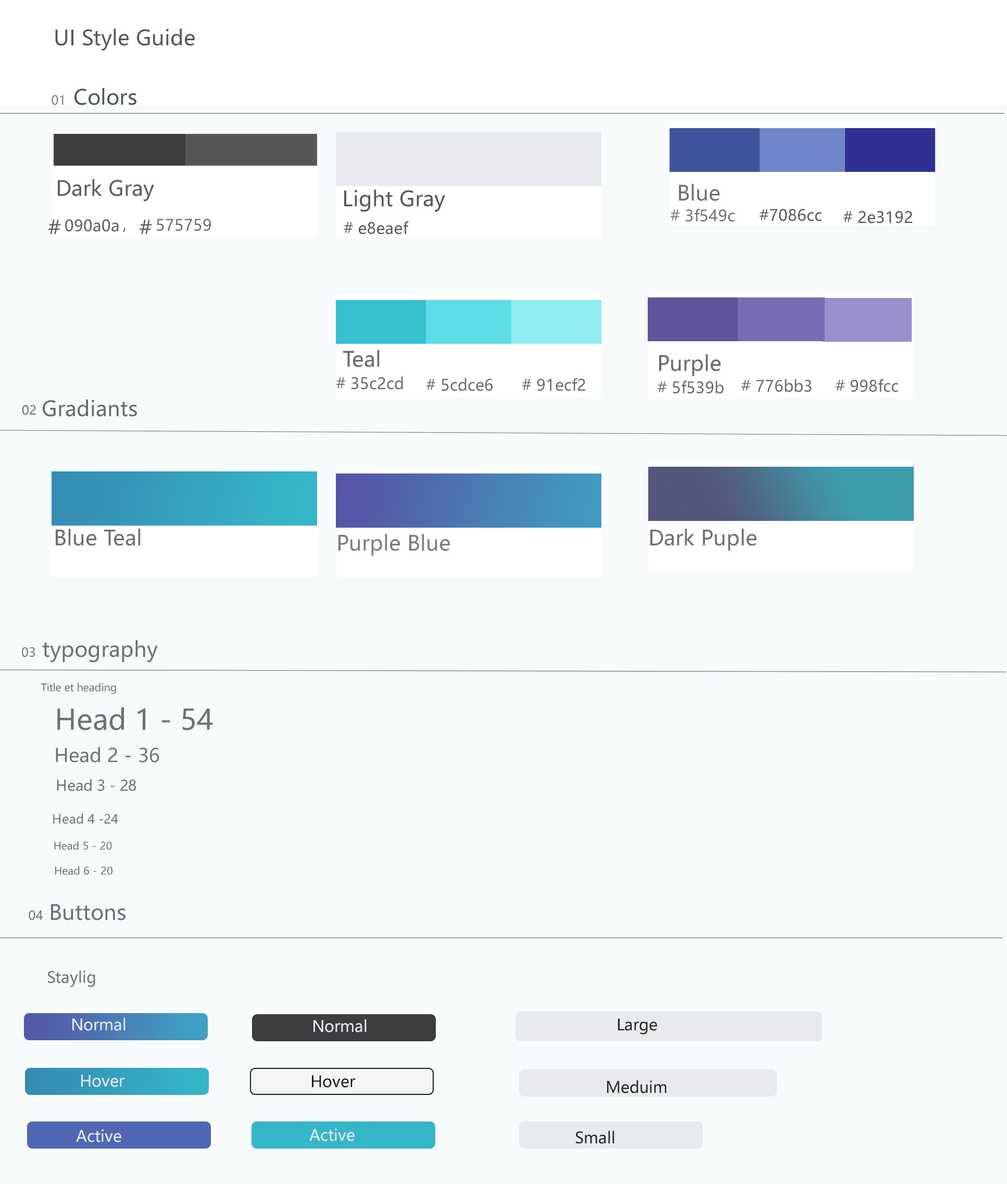
<style>
.page{position:relative;width:1007px;height:1184px;background:#f8fbfc}
.page>*{position:absolute;margin:0}
.t1{font:20.8px "MicrosoftYaHeiUI";color:#575759}
.t2{font:20.8px "MicrosoftYaHeiUI";color:#525556}
.t3{font:12.5px "MicrosoftYaHeiUI";color:#7a7a7a}
.t4{font:20.8px "MicrosoftYaHeiUI";color:#5c5e5f}
.t5{font:20.8px "MicrosoftYaHeiUI";color:#727273}
.t6{font:15.6px "MicrosoftYaHeiUI";color:#727273}
.t7{font:15.6px "MicrosoftYaHeiUI";color:#575759}
.t8{font:15.6px "MicrosoftYaHeiUI";color:#5a5c5d}
.t9{font:15.6px "MicrosoftYaHeiUI";color:#6c6d70}
.t10{font:20.8px "MicrosoftYaHeiUI";color:#6a6a6d}
.t11{font:15.6px "MicrosoftYaHeiUI";color:#6a6a6d}
.t12{font:12.5px "MicrosoftYaHeiUI";color:#6a6a6d}
.t13{font:20.8px "MicrosoftYaHeiUI";color:#6b6f6f}
.t14{font:20.8px "MicrosoftYaHeiUI";color:#7b7c7d}
.t15{font:20.8px "MicrosoftYaHeiUI";color:#6c7273}
.t16{font:12.5px "MicrosoftYaHeiUI";color:#6c7273}
.t17{font:10.4px "MicrosoftYaHeiUI";color:#6c7273}
.t18{font:28.1px "MicrosoftYaHeiUI";color:#6c7273}
.t19{font:18.7px "MicrosoftYaHeiUI";color:#6c7273}
.t20{font:14.6px "MicrosoftYaHeiUI";color:#6c7273}
.t21{font:15.6px "MicrosoftYaHeiUI";color:#6c7273}
.t22{font:15.6px "MicrosoftYaHeiUI";color:#e8eaef}
.t23{font:15.6px "MicrosoftYaHeiUI";color:#202124}
.t24{font:15.6px "MicrosoftYaHeiUI";color:#171819}
</style>
<div class="page">
<p class="t1" style="left:55px;top:29px;width:140px;height:22px">UI Style Guide</p>
<p class="t2" style="left:74px;top:88px;width:62px;height:17px">Colors</p>
<p class="t3" style="left:52px;top:95px;width:12px;height:10px">01</p>
<p class="t4" style="left:58px;top:179px;width:96px;height:23px">Dark Gray</p>
<p class="t5" style="left:679px;top:184px;width:41px;height:17px">Blue</p>
<p class="t1" style="left:344px;top:190px;width:101px;height:22px">Light Gray</p>
<p class="t6" style="left:670px;top:208px;width:65px;height:14px"># 3f549c</p>
<p class="t7" style="left:759px;top:209px;width:63px;height:12px">#7086cc</p>
<p class="t4" style="left:48px;top:219px;width:13px;height:15px">#</p>
<p class="t8" style="left:65px;top:219px;width:54px;height:13px">090a0a</p>
<p class="t4" style="left:139px;top:219px;width:13px;height:15px">#</p>
<p class="t9" style="left:157px;top:219px;width:54px;height:12px">575759</p>
<p class="t7" style="left:344px;top:221px;width:65px;height:13px"># e8eaef</p>
<p class="t7" style="left:843px;top:211px;width:69px;height:12px"># 2e3192</p>
<p class="t8" style="left:123px;top:228px;width:3px;height:4px">,</p>
<p class="t10" style="left:659px;top:354px;width:62px;height:22px">Purple</p>
<p class="t11" style="left:336px;top:377px;width:67px;height:13px"># 35c2cd</p>
<p class="t11" style="left:522px;top:378px;width:63px;height:13px"># 91ecf2</p>
<p class="t11" style="left:426px;top:378px;width:67px;height:13px"># 5cdce6</p>
<p class="t11" style="left:657px;top:380px;width:67px;height:14px"># 5f539b</p>
<p class="t11" style="left:741px;top:379px;width:71px;height:13px"># 776bb3</p>
<p class="t11" style="left:835px;top:379px;width:63px;height:13px"># 998fcc</p>
<p class="t10" style="left:43px;top:399px;width:94px;height:18px">Gradiants</p>
<p class="t12" style="left:22px;top:405px;width:14px;height:10px">02</p>
<p class="t13" style="left:56px;top:529px;width:85px;height:17px">Blue Teal</p>
<p class="t14" style="left:339px;top:534px;width:111px;height:22px">Purple Blue</p>
<p class="t15" style="left:651px;top:529px;width:106px;height:22px">Dark Puple</p>
<p class="t15" style="left:22px;top:640px;width:136px;height:22px"><span class="t16">03</span> typography</p>
<p class="t17" style="left:41px;top:683px;width:75px;height:11px">Title et heading</p>
<p class="t18" style="left:57px;top:707px;width:156px;height:23px">Head 1 - 54</p>
<p class="t19" style="left:56px;top:747px;width:103px;height:15px">Head 2 - 36</p>
<p class="t20" style="left:57px;top:779px;width:79px;height:12px">Head 3 - 28</p>
<p class="t16" style="left:53px;top:813px;width:65px;height:11px">Head 4 -24</p>
<p class="t17" style="left:54px;top:841px;width:58px;height:9px">Head 5 - 20</p>
<p class="t17" style="left:55px;top:866px;width:57px;height:9px">Head 6 - 20</p>
<p class="t15" style="left:29px;top:904px;width:97px;height:16px"><span class="t16">04 </span>Buttons</p>
<p class="t21" style="left:48px;top:970px;width:47px;height:17px">Staylig</p>
<p class="t22" style="left:72px;top:1018px;width:54px;height:13px">Normal</p>
<p class="t22" style="left:314px;top:1019px;width:53px;height:13px">Normal</p>
<p class="t23" style="left:618px;top:1018px;width:39px;height:16px">Large</p>
<p class="t22" style="left:81px;top:1074px;width:44px;height:13px">Hover</p>
<p class="t24" style="left:312px;top:1075px;width:44px;height:12px">Hover</p>
<p class="t23" style="left:607px;top:1080px;width:60px;height:13px">Meduim</p>
<p class="t22" style="left:76px;top:1129px;width:45px;height:13px">Active</p>
<p class="t22" style="left:309px;top:1128px;width:46px;height:13px">Active</p>
<p class="t23" style="left:576px;top:1131px;width:39px;height:13px">Small</p>
</div>
